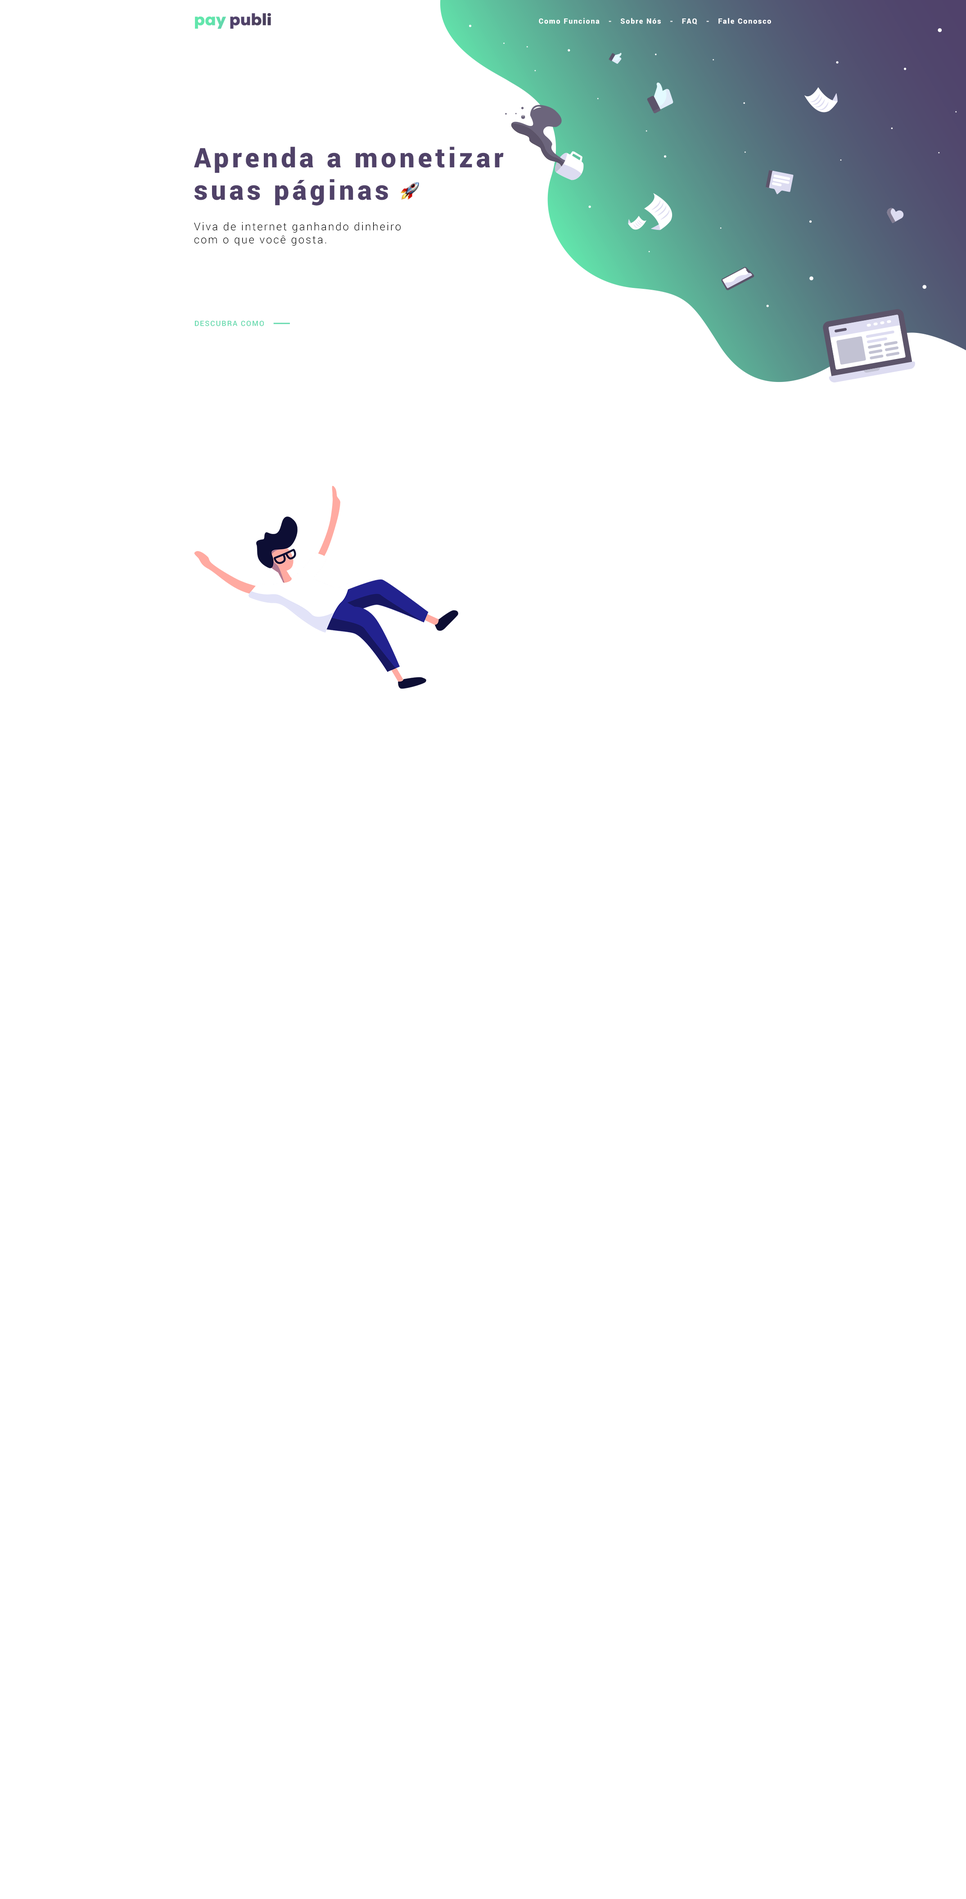
<style>
.page{position:relative;width:966px;height:1899px;background:#ffffff}
.page>*{position:absolute;margin:0}
.t1{font:7.2px "Roboto-Black";letter-spacing:0.12em;color:#ffffff}
.t2{font:27px "Roboto-Black";letter-spacing:0.12em;color:#504268}
.t3{font:10.8px "Roboto-Light";letter-spacing:0.12em;color:#000000}
.t4{font:7.2px "Roboto-Medium";letter-spacing:0.12em;color:#62d9ac}
</style>
<div class="page">
<p class="t1" style="left:539px;top:18px;width:232px;height:7px">Como Funciona   -   Sobre Nós   -   FAQ   -   Fale Conosco</p>
<p class="t2" style="left:194px;top:147px;width:310px;height:59px">Aprenda a monetizar<br>suas páginas</p>
<p class="t3" style="left:194px;top:222px;width:206px;height:24px">Viva de internet ganhando dinheiro<br>com o que você gosta.</p>
<p class="t4" style="left:195px;top:321px;width:69px;height:5px">DESCUBRA COMO</p>
</div>
